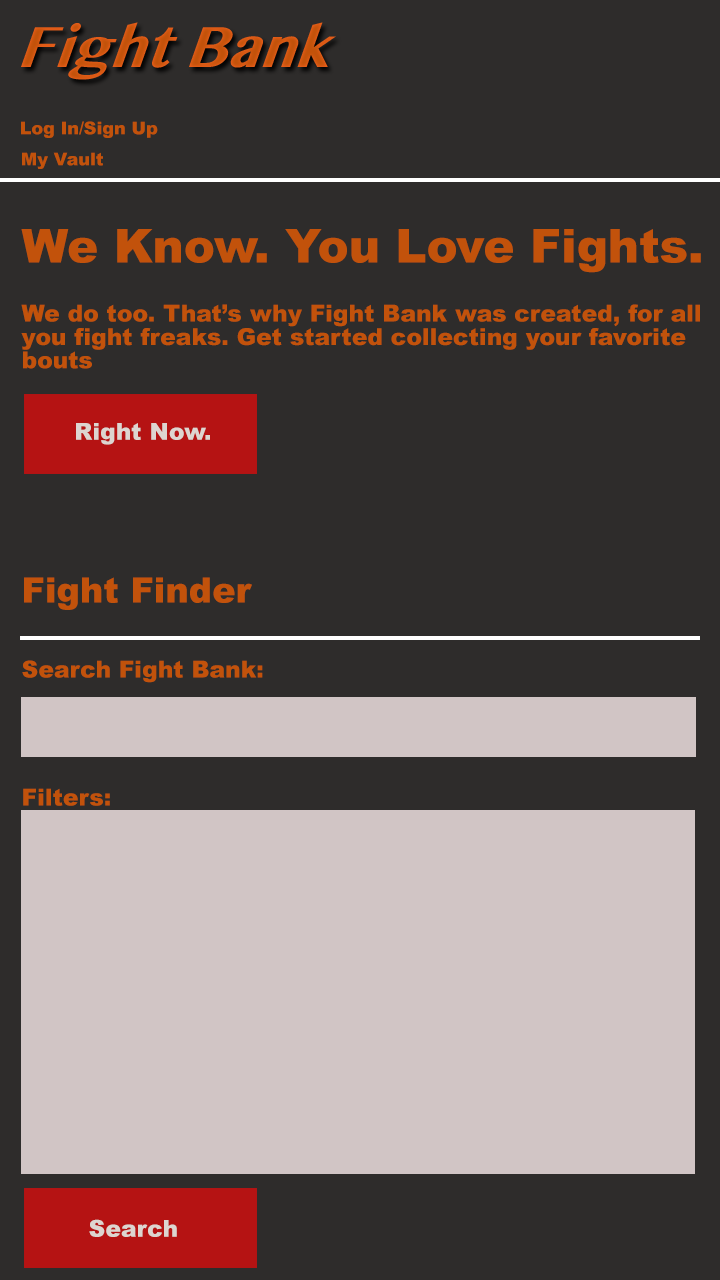
<style>
.page{position:relative;width:720px;height:1280px;background:#2e2c2b}
.page>*{position:absolute;margin:0}
.t1{font:17.5px "Arial-Black";color:#c2520b}
.t2{font:46.7px "Arial-Black";color:#c2520b}
.t3{font:23.3px/23.3px "Arial-Black";color:#c2520b}
.t4{font:23.3px "Arial-Black";color:#ddd5d0}
.t5{font:35px "Arial-Black";color:#c2520b}
.t6{font:23.3px "Arial-Black";color:#c2520b}
</style>
<div class="page">
<p class="t1" style="left:21px;top:121px;width:137px;height:17px">Log In/Sign Up</p>
<p class="t1" style="left:22px;top:152px;width:81px;height:17px">My Vault</p>
<p class="t2" style="left:21px;top:229px;width:680px;height:44px">We Know. You Love Fights.</p>
<p class="t3" style="left:21px;top:304px;width:679px;height:65px">We do too. That’s why Fight Bank was created, for all<br>you fight freaks. Get started collecting your favorite<br>bouts</p>
<p class="t4" style="left:76px;top:423px;width:134px;height:22px">Right Now.</p>
<p class="t5" style="left:24px;top:577px;width:228px;height:33px">Fight Finder</p>
<p class="t6" style="left:22px;top:660px;width:241px;height:23px">Search Fight Bank:</p>
<p class="t6" style="left:23px;top:788px;width:87px;height:18px">Filters:</p>
<p class="t4" style="left:89px;top:1219px;width:88px;height:18px">Search</p>
</div>
